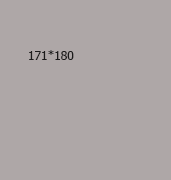
<style>
.page{position:relative;width:171px;height:180px;background:#aea7a7}
.page>*{position:absolute;margin:0}
.t1{font:12px "Tahoma";color:#1c1b1b}
</style>
<div class="page">
<p class="t1" style="left:29px;top:50px;width:45px;height:10px">171*180</p>
</div>
